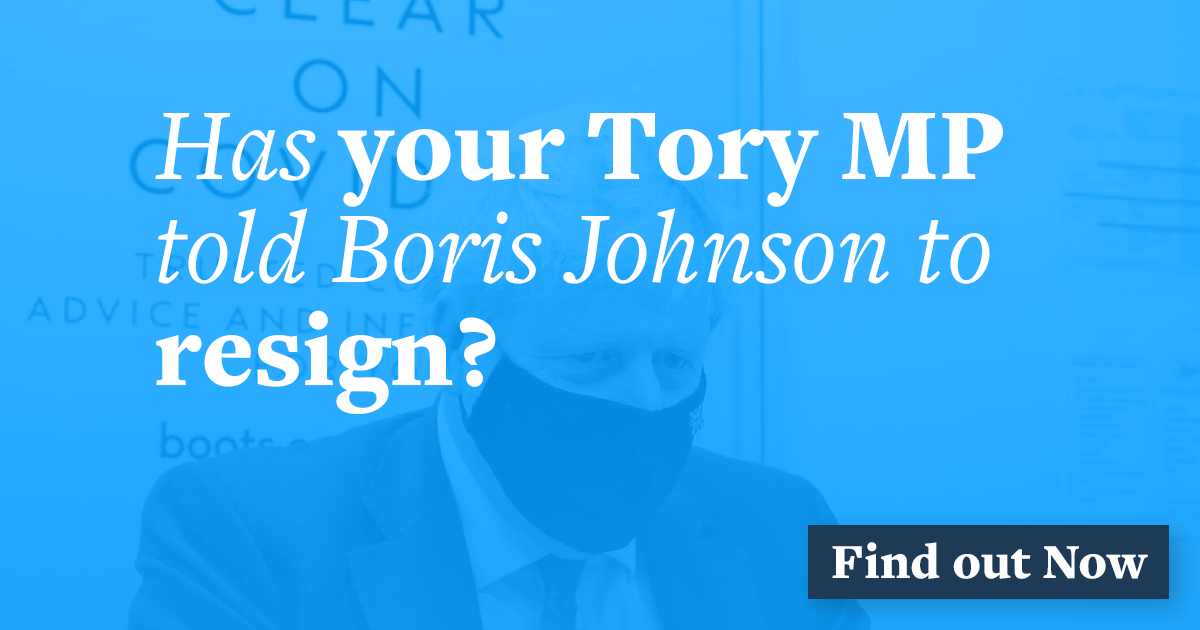
<style>
.page{position:relative;width:1200px;height:630px}
.page>*{position:absolute;margin:0}
.t1{font:105.6px/103px "FreightTextProBook-Italic";color:#ffffff}
.t2{font:105.6px/103px "FreightTextProBlack-Regular";color:#ffffff}
.t3{font:50.9px "FreightTextProBlack-Regular";color:#ffffff}
</style>
<div class="page">
<p class="t1" style="left:155px;top:113px;width:848px;height:302px">Has <span class="t2">your Tory MP<br></span>told Boris Johnson to<br><span class="t2">resign?</span></p>
<p class="t3" style="left:832px;top:542px;width:316px;height:37px">Find out Now</p>
</div>
